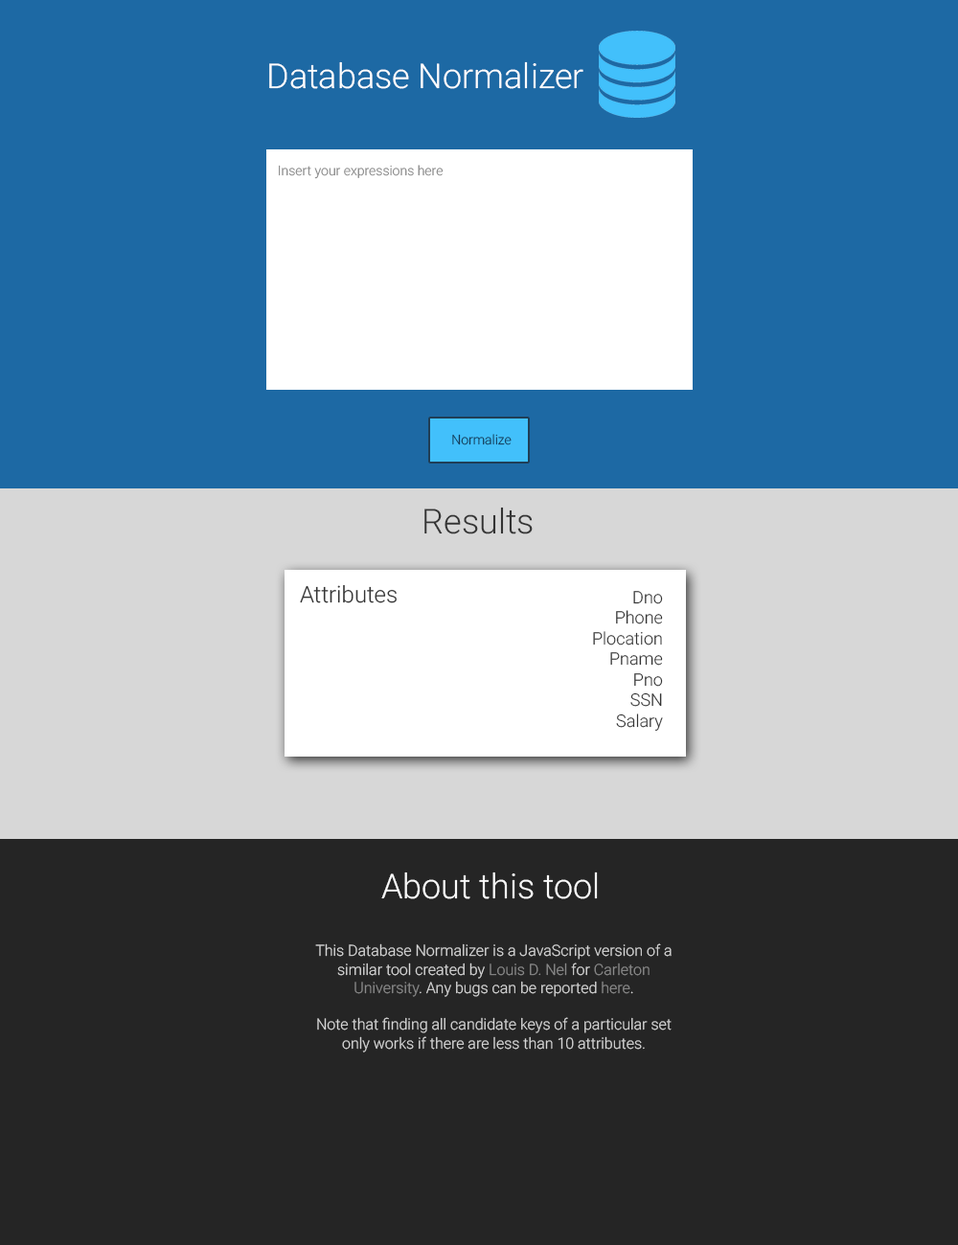
<style>
.page{position:relative;width:958px;height:1245px;background:#252525}
.page>*{position:absolute;margin:0}
.t1{font:34.5px "Roboto-Light";color:#ffffff}
.t2{font:13.4px "Roboto-Light";color:#888888}
.t3{font:13.4px "Roboto-Light";color:#143c5a}
.t4{font:13.4px "Roboto-Light";color:#b1d7f4}
.t5{font:34.5px "Roboto-Light";color:#343434}
.t6{font:23px "Roboto-Light";color:#343434}
.t7{font:17.2px "Roboto-Light";color:#343434}
.t8{font:34.5px "Roboto-Light";color:#fbfbfb}
.t9{font:15.3px "Roboto-Light";color:#d7d7d7}
.t10{font:15.3px "Roboto-Light";color:#8a8a8a}
</style>
<div class="page">
<p class="t1" style="left:269px;top:61px;width:314px;height:28px">Database Normalizer</p>
<p class="t2" style="left:279px;top:165px;width:164px;height:14px">Insert your expressions here</p>
<p class="t3" style="left:452px;top:434px;width:59px;height:11px"><span class="t4"><br></span>Normalize</p>
<p class="t5" style="left:424px;top:507px;width:109px;height:27px">Results</p>
<p class="t6" style="left:300px;top:584px;width:97px;height:19px">Attributes</p>
<p class="t7" style="left:593px;top:591px;width:70px;height:140px;text-align:right">Dno<br>Phone<br>Plocation<br>Pname<br>Pno<br>SSN<br>Salary</p>
<p class="t8" style="left:381px;top:872px;width:217px;height:27px">About this tool</p>
<p class="t9" style="left:315px;top:943px;width:356px;height:110px;text-align:center">This Database Normalizer is a JavaScript version of a similar tool created by <span class="t10">Louis D. Nel</span> for <span class="t10">Carleton University</span>. Any bugs can be reported <span class="t10">here</span>.<br><br>Note that finding all candidate keys of a particular set only works if there are less than 10 attributes.</p>
</div>
